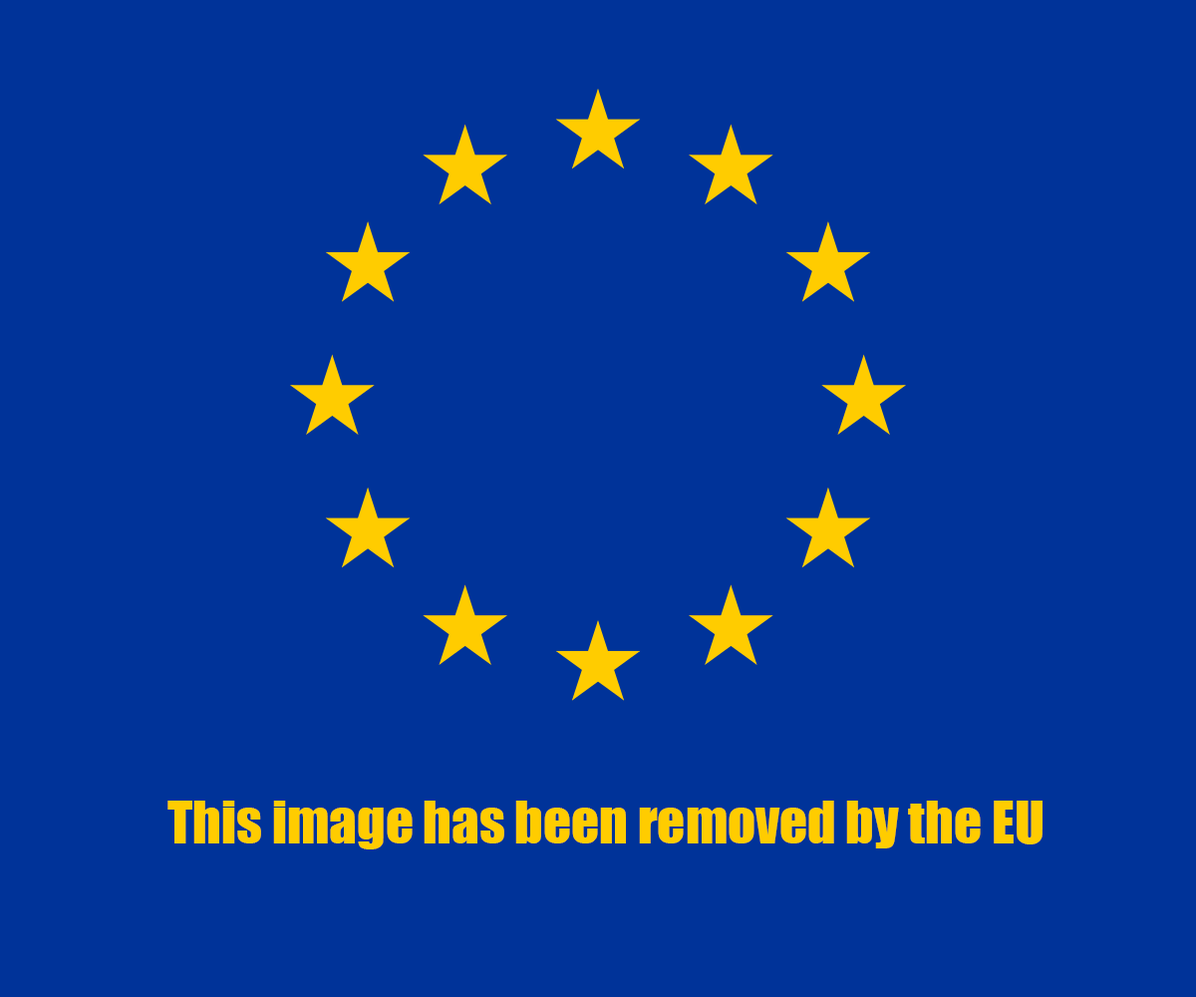
<style>
.page{position:relative;width:1196px;height:997px;background:#003399}
.page>*{position:absolute;margin:0}
.t1{font:54.8px "Impact";color:#ffcc00}
</style>
<div class="page">
<p class="t1" style="left:167px;top:800px;width:876px;height:49px">This image has been removed by the EU</p>
</div>
